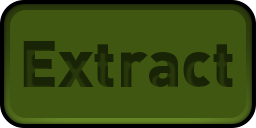
<style>
.page{position:relative;width:256px;height:128px;background:#3f5710}
.page>*{position:absolute;margin:0}
.t1{font:64px "DIN-Black";color:#29380a}
</style>
<div class="page">
<p class="t1" style="left:23px;top:41px;width:210px;height:46px">Extract</p>
</div>
